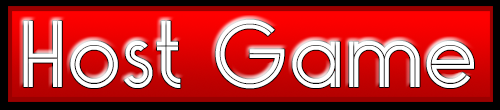
<style>
.page{position:relative;width:500px;height:110px}
.page>*{position:absolute;margin:0}
.t1{font:110px "Monopoly-Inline";color:#ffffff}
</style>
<div class="page">
<p class="t1" style="left:23px;top:19px;width:451px;height:70px">Host Game</p>
</div>
